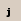
<style>
.page{position:relative;width:21px;height:21px;background:#d9cdc1}
.page>*{position:absolute;margin:0}
.t1{font:9px "Tahoma-Bold";color:#000000}
</style>
<div class="page">
<p class="t1" style="left:6px;top:8px;width:4px;height:9px">j</p>
</div>
